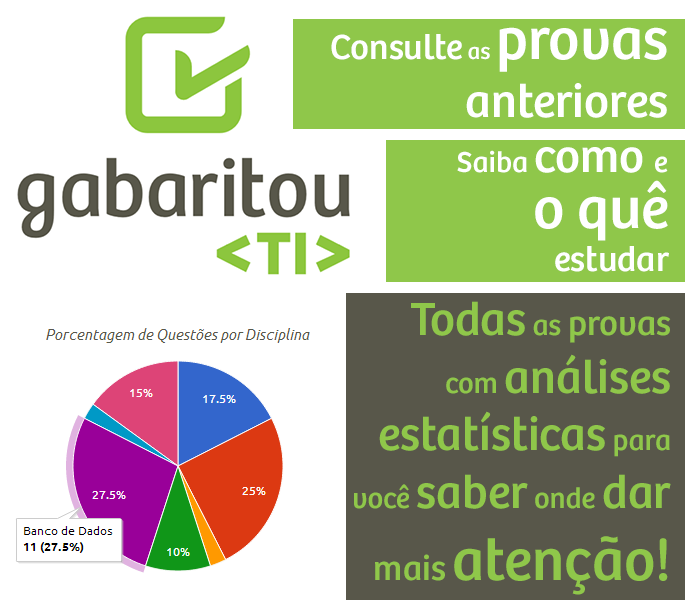
<style>
.page{position:relative;width:685px;height:600px;background:#ffffff}
.page>*{position:absolute;margin:0}
.t1{font:48px "Bree-Regular";color:#ffffff}
.t2{font:36px "Bree-Regular";color:#ffffff}
.t3{font:24px "Bree-Regular";color:#ffffff}
.t4{font:60px "Bree-Regular";color:#ffffff}
.t5{font:30px "Bree-Regular";color:#ffffff}
.t6{font:48px "Bree-Regular";color:#8fc74a}
.t7{font:30px "Bree-Regular";color:#8fc74a}
.t8{font:36px "Bree-Regular";color:#8fc74a}
.t9{font:60px "Bree-Regular";color:#8fc74a}
</style>
<div class="page">
<p class="t1" style="left:331px;top:27px;width:336px;height:91px;text-align:right"><span class="t2">Consulte</span><span class="t3"> as </span><span class="t4">provas<br></span>anteriores</p>
<p class="t5" style="left:457px;top:147px;width:211px;height:26px">Saiba <span class="t1">como </span>e</p>
<p class="t2" style="left:535px;top:180px;width:134px;height:92px;text-align:right"><span class="t4">o quê<br></span>estudar</p>
<p class="t6" style="left:354px;top:301px;width:317px;height:294px;text-align:right">Todas<span class="t7"> as </span><span class="t8">provas<br></span><span class="t7">com </span>análises<br>estatísticas<span class="t7"> para<br>você </span>saber<span class="t7"> onde </span>dar<br><span class="t8">mais </span><span class="t9">atenção!</span></p>
</div>
